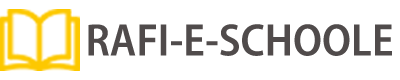
<style>
.page{position:relative;width:400px;height:80px;background:#ffffff}
.page>*{position:absolute;margin:0}
.t1{font:45.8px "MyriadConceptRoman-SemiboldSemiCondensed";color:#504b4b;font-weight:bold}
</style>
<div class="page">
<p class="t1" style="left:88px;top:24px;width:304px;height:32px">RAFI-E-SCHOOLE</p>
</div>
